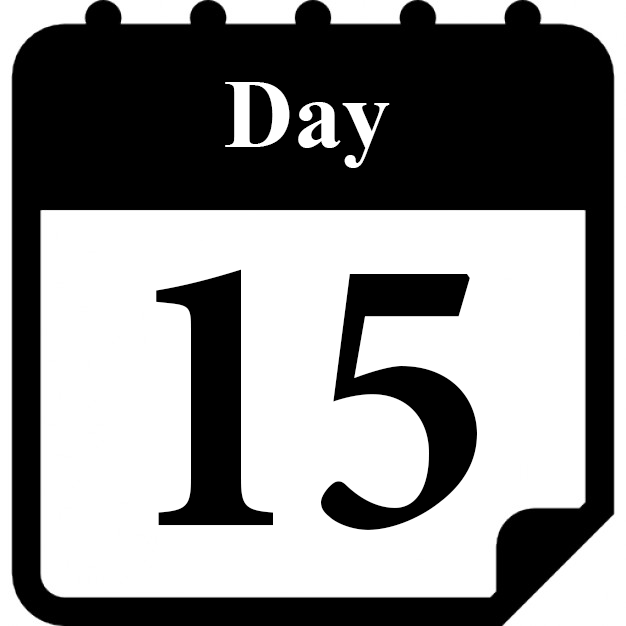
<style>
.page{position:relative;width:626px;height:626px;background:#ffffff}
.page>*{position:absolute;margin:0}
.t1{font:96.7px "TimesNewRomanPS-BoldMT";color:#ffffff}
.t2{font:402.2px "MinionPro-BoldCn";color:#000000}
</style>
<div class="page">
<p class="t1" style="left:225px;top:82px;width:165px;height:86px">Day</p>
<p class="t2" style="left:156px;top:269px;width:321px;height:261px">15</p>
</div>
